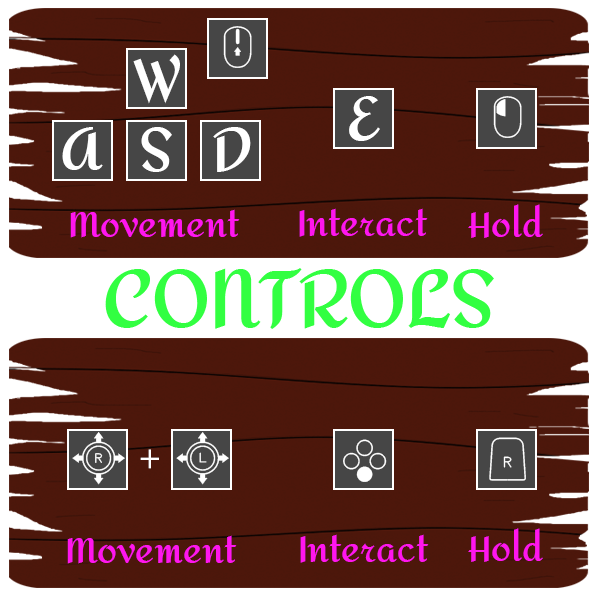
<style>
.page{position:relative;width:600px;height:600px;background:#4d170b}
.page>*{position:absolute;margin:0}
.t1{font:59.2px "EsquireGenericGamepdFont_CL";color:#ffffff}
.t2{font:59.2px "Amita-Bold";color:#ffffff}
.t3{font:35.5px "Amita-Bold";color:#ff16ee}
.t4{font:78.9px "Amita-Bold";color:#32ff41}
.t5{font:35.5px "MyriadPro-Regular";color:#ffffff}
</style>
<div class="page">
<p class="t1" style="left:223px;top:26px;width:29px;height:42px">Z</p>
<p class="t2" style="left:133px;top:54px;width:47px;height:50px">W</p>
<p class="t2" style="left:349px;top:96px;width:31px;height:45px">E</p>
<p class="t1" style="left:493px;top:96px;width:29px;height:42px">J</p>
<p class="t2" style="left:62px;top:127px;width:41px;height:43px">A</p>
<p class="t2" style="left:141px;top:127px;width:31px;height:45px">S</p>
<p class="t2" style="left:213px;top:127px;width:38px;height:45px">D</p>
<p class="t3" style="left:70px;top:209px;width:170px;height:29px">Movement</p>
<p class="t3" style="left:299px;top:208px;width:129px;height:29px">Interact</p>
<p class="t3" style="left:468px;top:204px;width:75px;height:34px">Hold</p>
<p class="t4" style="left:105px;top:268px;width:389px;height:61px">CONTROLS</p>
<p class="t1" style="left:72px;top:432px;width:157px;height:53px">y    8</p>
<p class="t1" style="left:489px;top:437px;width:37px;height:44px">v</p>
<p class="t5" style="left:140px;top:449px;width:19px;height:20px">+</p>
<p class="t1" style="left:343px;top:439px;width:44px;height:43px">,</p>
<p class="t3" style="left:300px;top:534px;width:129px;height:29px">Interact</p>
<p class="t3" style="left:468px;top:528px;width:75px;height:34px">Hold</p>
<p class="t3" style="left:67px;top:535px;width:170px;height:29px">Movement</p>
</div>
